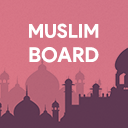
<style>
.page{position:relative;width:128px;height:128px}
.page>*{position:absolute;margin:0}
.t1{font:19px "ProductSans-Bold";color:#ffffff}
.t2{font:20.3px "ProductSans-Bold";color:#ffffff}
</style>
<div class="page">
<p class="t1" style="left:29px;top:23px;width:70px;height:40px;text-align:center">MUSLIM<br><span class="t2">BOARD</span></p>
</div>
